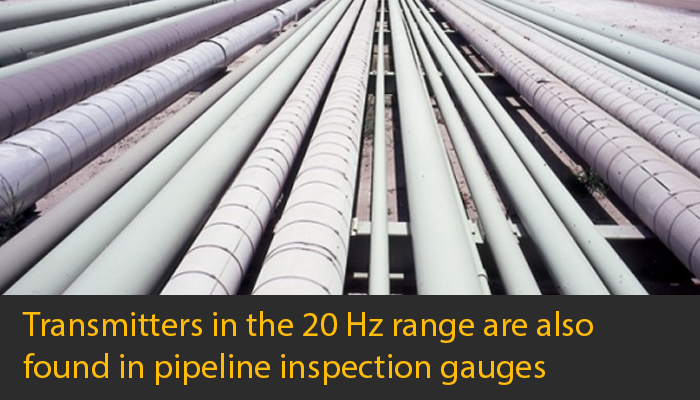
<style>
.page{position:relative;width:700px;height:400px;background:#2c2c2c}
.page>*{position:absolute;margin:0}
.t1{font:35px "MyriadPro-Regular";color:#ffbc09}
</style>
<div class="page">
<p class="t1" style="left:22px;top:311px;width:571px;height:74px">Transmitters in the 20 Hz range are also <br>found in pipeline inspection gauges</p>
</div>
